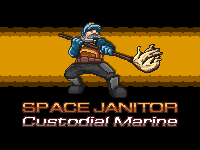
<style>
.page{position:relative;width:200px;height:150px;background:#000000}
.page>*{position:absolute;margin:0}
.t1{font:14px "EurostileT-RegExt";font-weight:bold}
.t2{font:14px "EurostileT-RegExt";color:#ffffff;font-weight:bold;font-style:italic}
</style>
<div class="page">
<p class="t1" style="left:23px;top:103px;width:154px;height:9px">SPACE JANITOR</p>
<p class="t2" style="left:23px;top:117px;width:154px;height:9px">Custodial Marine</p>
</div>
